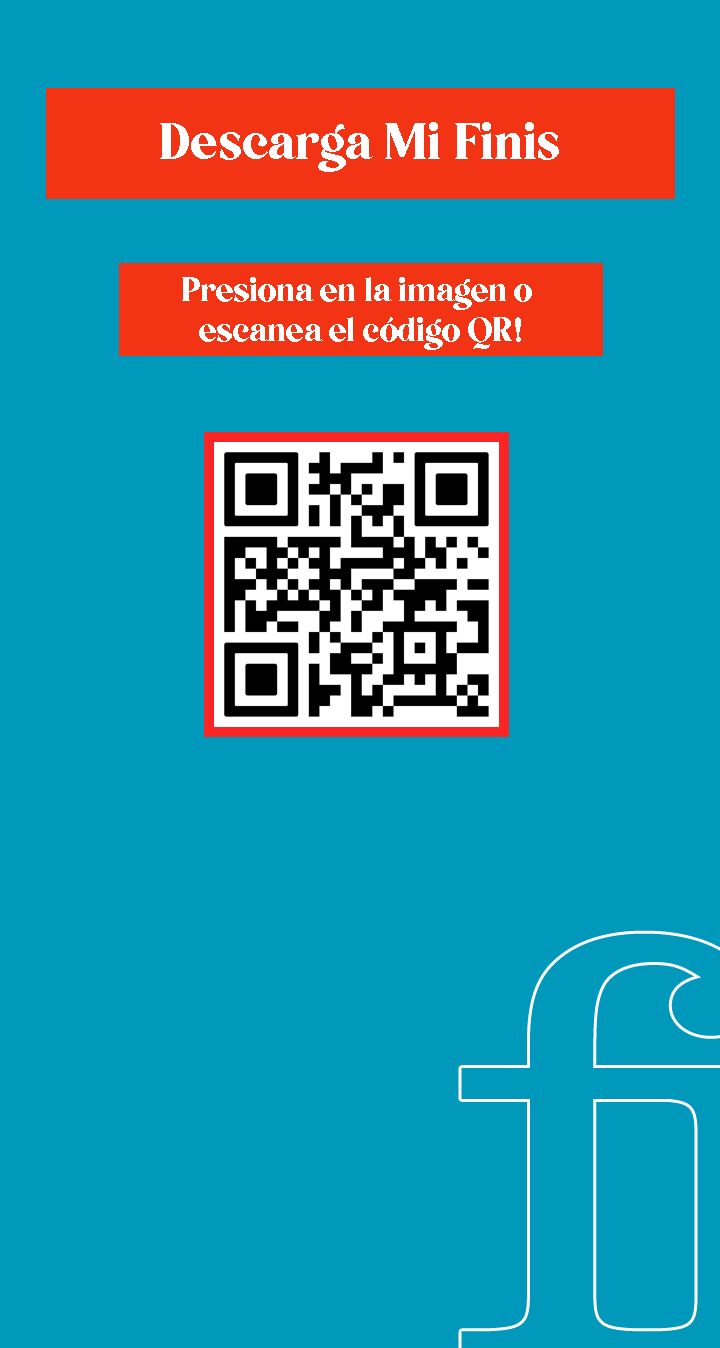
<style>
.page{position:relative;width:720px;height:1348px;background:#0099bb}
.page>*{position:absolute;margin:0}
.t1{font:50.2px "5thAvenue";color:#ffffff}
.t2{font:32.9px "5thAvenue";color:#feffff}
</style>
<div class="page">
<p class="t1" style="left:160px;top:122px;width:399px;height:50px">Descarga Mi Finis</p>
<p class="t2" style="left:182px;top:277px;width:350px;height:73px;text-align:center">Presiona en la imagen o <br>escanea el código QR!</p>
</div>
